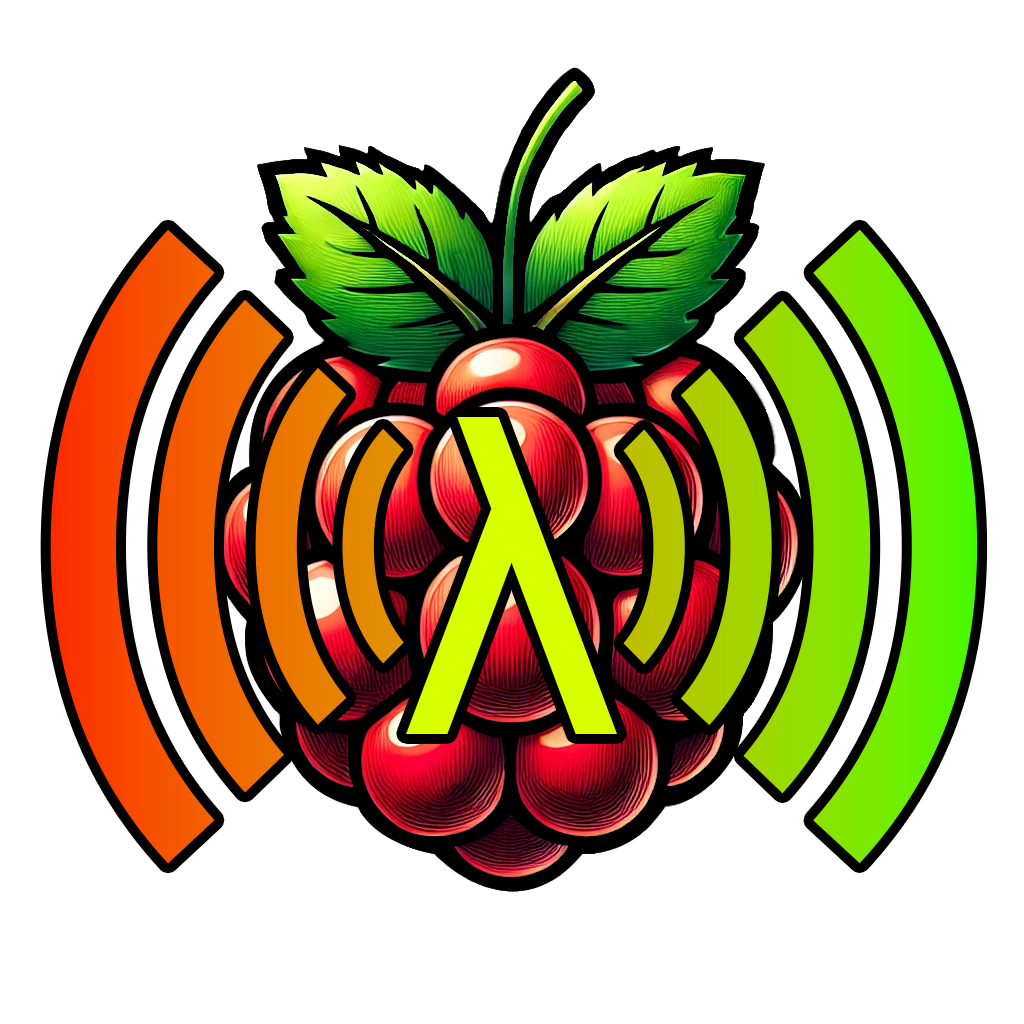
<style>
.page{position:relative;width:1024px;height:1024px;background:#ffffff}
.page>*{position:absolute;margin:0}
.t1{font:675px "Bahnschrift_420.000wght";color:#fa4300}
.t2{font:675px "Bahnschrift_420.000wght";color:#66f100}
.t3{font:525px "Bahnschrift_579.000wght_96.000wdth";color:#f36100}
.t4{font:525px "Bahnschrift_579.000wght_96.000wdth";color:#8de100}
.t5{font:380px "Bahnschrift_584.000wght_95.000wdth";color:#eb7800}
.t6{font:380px "Bahnschrift_584.000wght_95.000wdth";color:#a5d200}
.t7{font:443.2px "ArialMT";color:#d8ff00}
.t8{font:250px "Bahnschrift_700.000wght_94.000wdth";color:#e38a00}
.t9{font:250px "Bahnschrift_700.000wght_94.000wdth";color:#b7c400}
</style>
<div class="page">
<p class="t1" style="left:50px;top:229px;width:165px;height:635px;rotate:180deg">)</p>
<p class="t2" style="left:813px;top:229px;width:165px;height:635px">)</p>
<p class="t3" style="left:157px;top:299px;width:127px;height:494px;rotate:180deg">)</p>
<p class="t4" style="left:743px;top:300px;width:128px;height:494px">)</p>
<p class="t5" style="left:255px;top:367px;width:92px;height:358px;rotate:180deg">)</p>
<p class="t6" style="left:680px;top:368px;width:92px;height:358px">)</p>
<p class="t7" style="left:406px;top:417px;width:211px;height:317px">λ</p>
<p class="t8" style="left:342px;top:428px;width:62px;height:236px;rotate:180deg">)</p>
<p class="t9" style="left:623px;top:429px;width:62px;height:236px">)</p>
</div>
